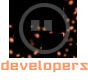
<style>
.page{position:relative;width:88px;height:80px;background:#ffffff}
.page>*{position:absolute;margin:0}
.t1{font:12px "BabyUniverse";letter-spacing:0.1em;color:#ff9966}
</style>
<div class="page">
<p class="t1" style="left:1px;top:60px;width:87px;height:13px">developers</p>
</div>
